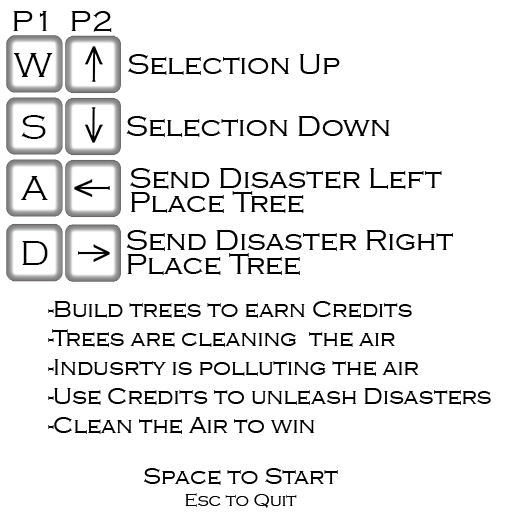
<style>
.page{position:relative;width:512px;height:512px;background:#ffffff}
.page>*{position:absolute;margin:0}
.t1{font:30px "CopperplateGothic-Light";color:#000000}
.t2{font:36px "CopperplateGothic-Light";color:#000000}
.t3{font:30px/24px "CopperplateGothic-Light";color:#000000}
.t4{font:24px "CopperplateGothic-Light";color:#000000}
.t5{font:18px "CopperplateGothic-Light";color:#000000}
</style>
<div class="page">
<p class="t1" style="left:13px;top:11px;width:99px;height:21px">P1  P2</p>
<p class="t2" style="left:13px;top:53px;width:40px;height:24px">W</p>
<p class="t1" style="left:128px;top:54px;width:212px;height:21px">Selection Up</p>
<p class="t2" style="left:21px;top:115px;width:25px;height:24px">S</p>
<p class="t1" style="left:126px;top:116px;width:264px;height:21px">Selection Down</p>
<p class="t3" style="left:130px;top:168px;width:312px;height:45px">Send Disaster Left<br>Place Tree</p>
<p class="t2" style="left:21px;top:176px;width:27px;height:24px">A</p>
<p class="t1" style="left:126px;top:230px;width:327px;height:45px">Send Disaster Right<br><span class="t3">Place Tree</span></p>
<p class="t2" style="left:22px;top:241px;width:26px;height:24px">D</p>
<p class="t4" style="left:48px;top:301px;width:443px;height:133px">-Build trees to earn Credits<br>-Trees are cleaning  the air<br>-Indusrty is polluting the air<br>-Use Credits to unleash Disasters<br>-Clean the Air to win</p>
<p class="t4" style="left:144px;top:468px;width:194px;height:40px;text-align:center">Space to Start<br><span class="t5">Esc to Quit</span></p>
</div>
